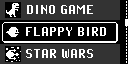
<style>
.page{position:relative;width:128px;height:64px;background:#333333}
.page>*{position:absolute;margin:0}
.t1{font:16px "PixelOperatorHB";color:#ffffff}
</style>
<div class="page">
<p class="t1" style="left:27px;top:5px;width:66px;height:9px">DINO GAME</p>
<p class="t1" style="left:26px;top:27px;width:80px;height:9px">FLAPPY BIRD</p>
<p class="t1" style="left:26px;top:49px;width:67px;height:9px">STAR WARS</p>
</div>
